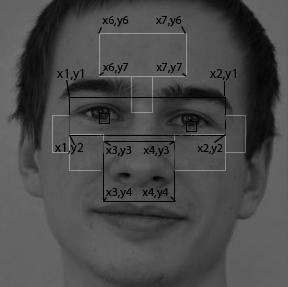
<style>
.page{position:relative;width:288px;height:287px}
.page>*{position:absolute;margin:0}
.t1{font:12px "MyriadPro-Regular";color:#000000}
.t2{font:13.3px "MyriadPro-Regular";color:#000000}
</style>
<div class="page">
<p class="t1" style="left:102px;top:16px;width:27px;height:11px">x6,y6</p>
<p class="t1" style="left:156px;top:16px;width:26px;height:11px">x7,y6</p>
<p class="t1" style="left:103px;top:63px;width:26px;height:11px">x6,y7</p>
<p class="t1" style="left:156px;top:63px;width:26px;height:11px">x7,y7</p>
<p class="t2" style="left:57px;top:69px;width:27px;height:12px">x1,y1</p>
<p class="t2" style="left:210px;top:69px;width:26px;height:12px">x2,y1</p>
<p class="t2" style="left:55px;top:143px;width:29px;height:12px">x1,y2</p>
<p class="t1" style="left:106px;top:146px;width:26px;height:11px">x3,y3</p>
<p class="t1" style="left:143px;top:146px;width:26px;height:11px">x4,y3</p>
<p class="t1" style="left:197px;top:144px;width:26px;height:11px">x2,y2</p>
<p class="t1" style="left:106px;top:188px;width:27px;height:11px">x3,y4</p>
<p class="t1" style="left:142px;top:188px;width:27px;height:11px">x4,y4</p>
</div>
